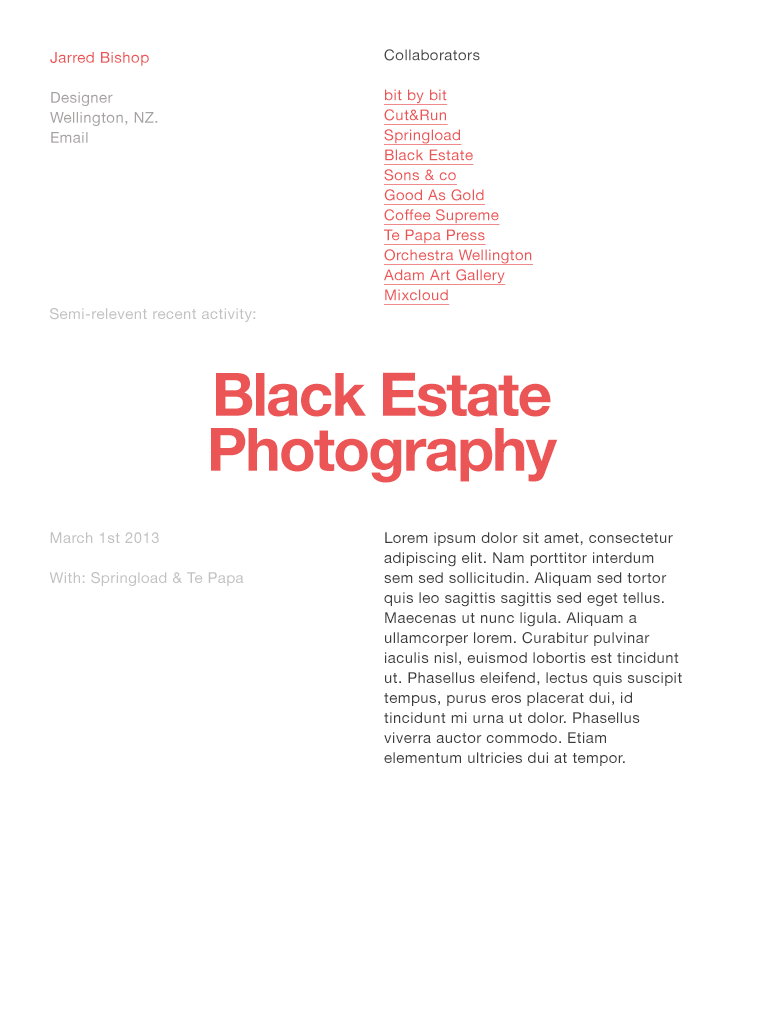
<style>
.page{position:relative;width:768px;height:1024px;background:#ffffff}
.page>*{position:absolute;margin:0}
.t1{font:15px/20px "HelveticaNeue";letter-spacing:0.03em;color:#a6a2a2}
.t2{font:15px/20px "HelveticaNeue";letter-spacing:0.03em;color:#eb5555}
.t3{font:15px/20px "HelveticaNeue";letter-spacing:0.03em;color:#eb5555;text-decoration:underline}
.t4{font:15px/20px "HelveticaNeue";letter-spacing:0.03em;color:#484848}
.t5{font:15px "HelveticaNeue";letter-spacing:0.03em;color:#c1c1c1}
.t6{font:60px/55px "HelveticaNeue-Bold";letter-spacing:-0.03em;color:#eb5555}
.t7{font:15px/20px "HelveticaNeue";letter-spacing:0.03em;color:#c1c1c1}
.t8{font:15px/20px "HelveticaNeue";letter-spacing:0.03em;color:#3c3c3c}
</style>
<div class="page">
<p class="t1" style="left:50px;top:52px;width:108px;height:91px"><span class="t2">Jarred Bishop<br><br></span>Designer<br>Wellington, NZ.<br>Email</p>
<p class="t3" style="left:384px;top:49px;width:149px;height:256px"><span class="t4">Collaborators<br><br></span>bit by bit<br>Cut&amp;Run<br>Springload<br>Black Estate<br>Sons &amp; co<br>Good As Gold<br>Coffee Supreme<br>Te Papa Press<br>Orchestra Wellington<br>Adam Art Gallery<br>Mixcloud</p>
<p class="t5" style="left:50px;top:308px;width:206px;height:14px">Semi-relevent recent activity:</p>
<p class="t6" style="left:211px;top:372px;width:347px;height:111px;text-align:center">Black Estate<br>Photography</p>
<p class="t7" style="left:49px;top:532px;width:195px;height:54px">March 1st 2013<br><br>With: Springload &amp; Te Papa</p>
<p class="t8" style="left:384px;top:532px;width:298px;height:234px">Lorem ipsum dolor sit amet, consectetur adipiscing elit. Nam porttitor interdum sem sed sollicitudin. Aliquam sed tortor quis leo sagittis sagittis sed eget tellus. Maecenas ut nunc ligula. Aliquam a ullamcorper lorem. Curabitur pulvinar iaculis nisl, euismod lobortis est tincidunt ut. Phasellus eleifend, lectus quis suscipit tempus, purus eros placerat dui, id tincidunt mi urna ut dolor. Phasellus viverra auctor commodo. Etiam elementum ultricies dui at tempor.</p>
</div>
